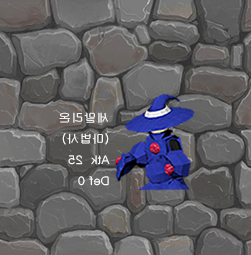
<style>
.page{position:relative;width:251px;height:255px}
.page>*{position:absolute;margin:0}
.t1{font:12px "Gulim";color:#ffffff;scale:1.06 1}
</style>
<div class="page">
<p class="t1" style="left:59px;top:112px;width:51px;height:74px;rotate:179deg">세말리온<br>(마법사)<br>Atk  25<br>Def 0</p>
</div>
